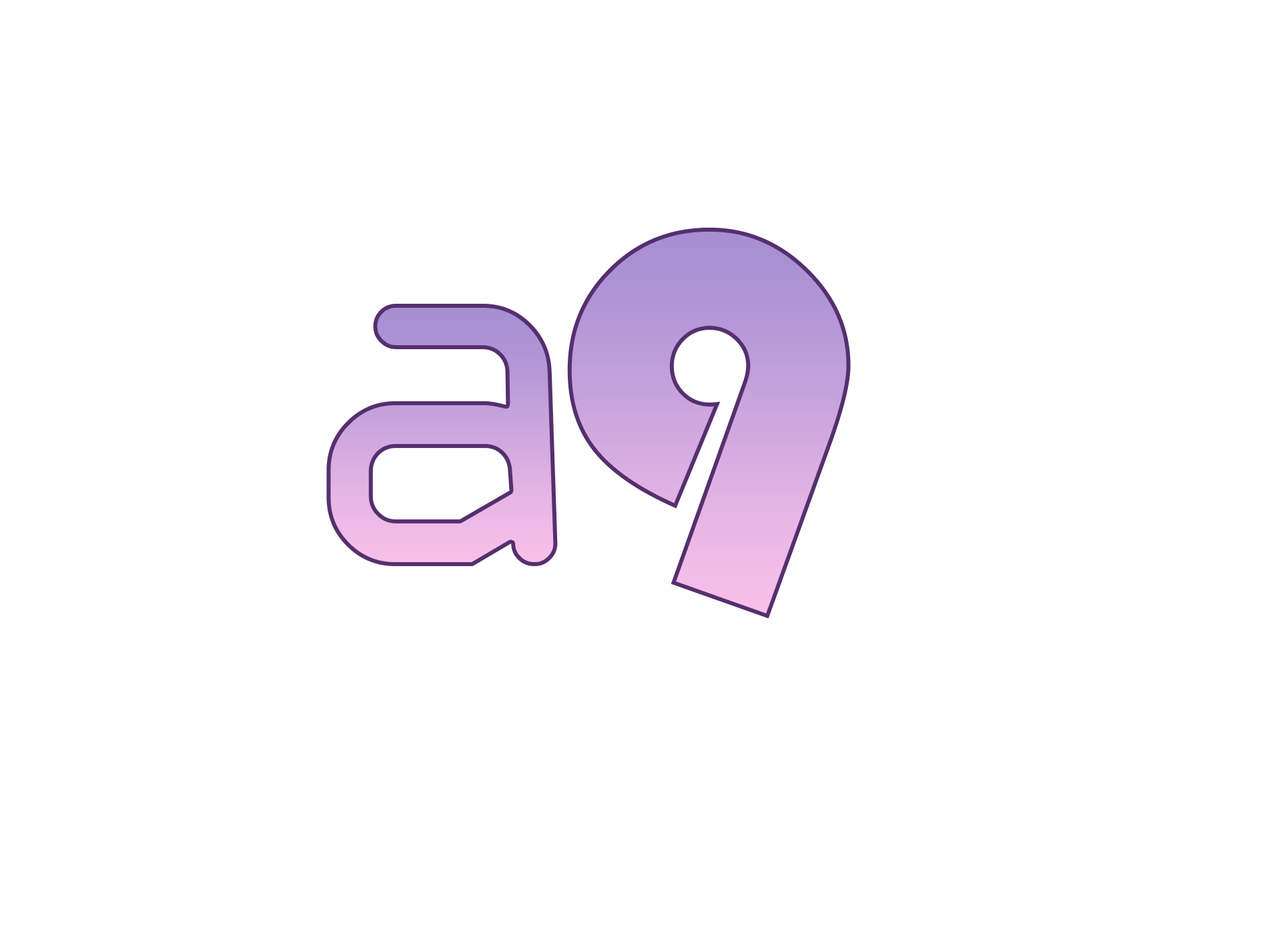
<style>
.page{position:relative;width:1261px;height:946px;background:#ffffff}
.page>*{position:absolute;margin:0}
.t1{font:556.1px "Bauhaus93"}
.t2{font:556.1px "OCRAExtended"}
</style>
<div class="page">
<p class="t1" style="left:567px;top:228px;width:284px;height:391px">9</p>
<p class="t2" style="left:326px;top:304px;width:232px;height:262px">a</p>
</div>
